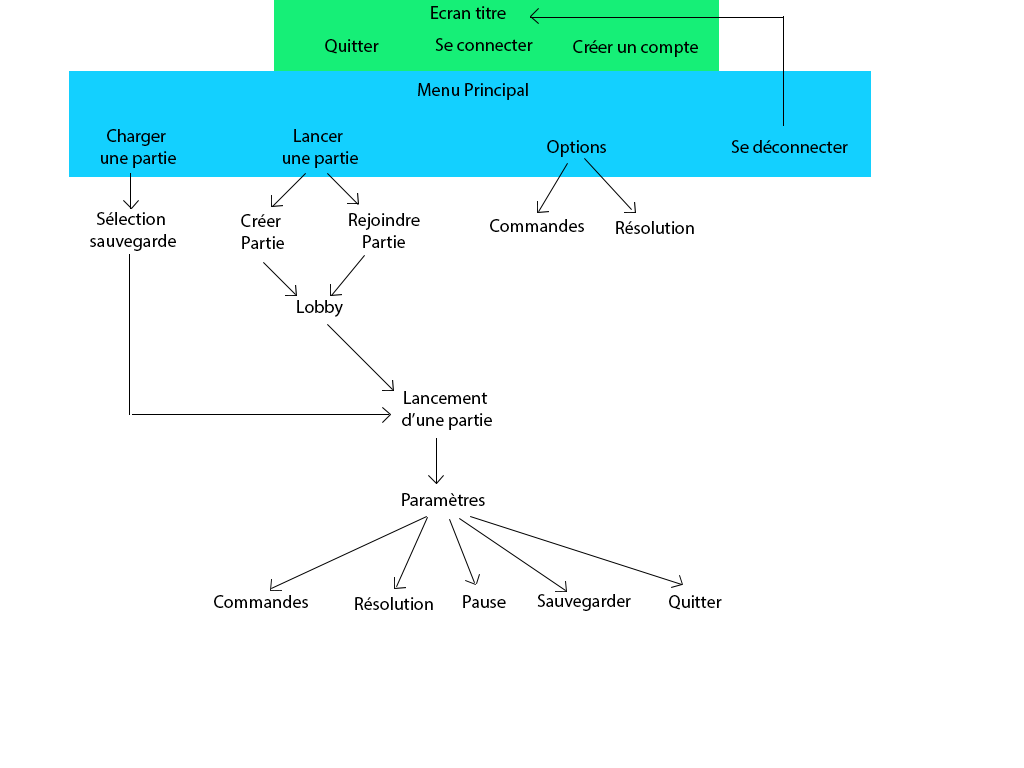
<style>
.page{position:relative;width:1024px;height:768px;background:#ffffff}
.page>*{position:absolute;margin:0}
.t1{font:18px "MyriadPro-Regular";color:#000000}
</style>
<div class="page">
<p class="t1" style="left:431px;top:6px;width:75px;height:13px">Ecran titre</p>
<p class="t1" style="left:325px;top:39px;width:54px;height:15px">Quitter</p>
<p class="t1" style="left:435px;top:38px;width:98px;height:13px">Se connecter</p>
<p class="t1" style="left:573px;top:40px;width:125px;height:17px">Créer un compte</p>
<p class="t1" style="left:418px;top:83px;width:110px;height:17px">Menu Principal</p>
<p class="t1" style="left:101px;top:129px;width:75px;height:39px;text-align:center">Charger <br>une partie</p>
<p class="t1" style="left:283px;top:129px;width:75px;height:39px;text-align:center">Lancer <br>une partie</p>
<p class="t1" style="left:547px;top:140px;width:59px;height:17px">Options</p>
<p class="t1" style="left:731px;top:140px;width:117px;height:13px">Se déconnecter</p>
<p class="t1" style="left:90px;top:212px;width:86px;height:39px;text-align:center">Sélection <br>sauvegarde</p>
<p class="t1" style="left:241px;top:214px;width:43px;height:35px;text-align:center">Créer <br>Partie</p>
<p class="t1" style="left:349px;top:213px;width:71px;height:35px;text-align:center">Rejoindre<br>Partie</p>
<p class="t1" style="left:490px;top:219px;width:94px;height:13px">Commandes</p>
<p class="t1" style="left:616px;top:221px;width:78px;height:13px">Résolution</p>
<p class="t1" style="left:297px;top:300px;width:46px;height:17px">Lobby</p>
<p class="t1" style="left:402px;top:391px;width:90px;height:39px;text-align:center">Lancement <br>d’une partie</p>
<p class="t1" style="left:402px;top:493px;width:83px;height:13px">Paramètres</p>
<p class="t1" style="left:214px;top:595px;width:94px;height:13px">Commandes</p>
<p class="t1" style="left:355px;top:597px;width:78px;height:13px">Résolution</p>
<p class="t1" style="left:463px;top:595px;width:43px;height:13px">Pause</p>
<p class="t1" style="left:537px;top:594px;width:94px;height:17px">Sauvegarder</p>
<p class="t1" style="left:669px;top:595px;width:53px;height:15px">Quitter</p>
</div>
